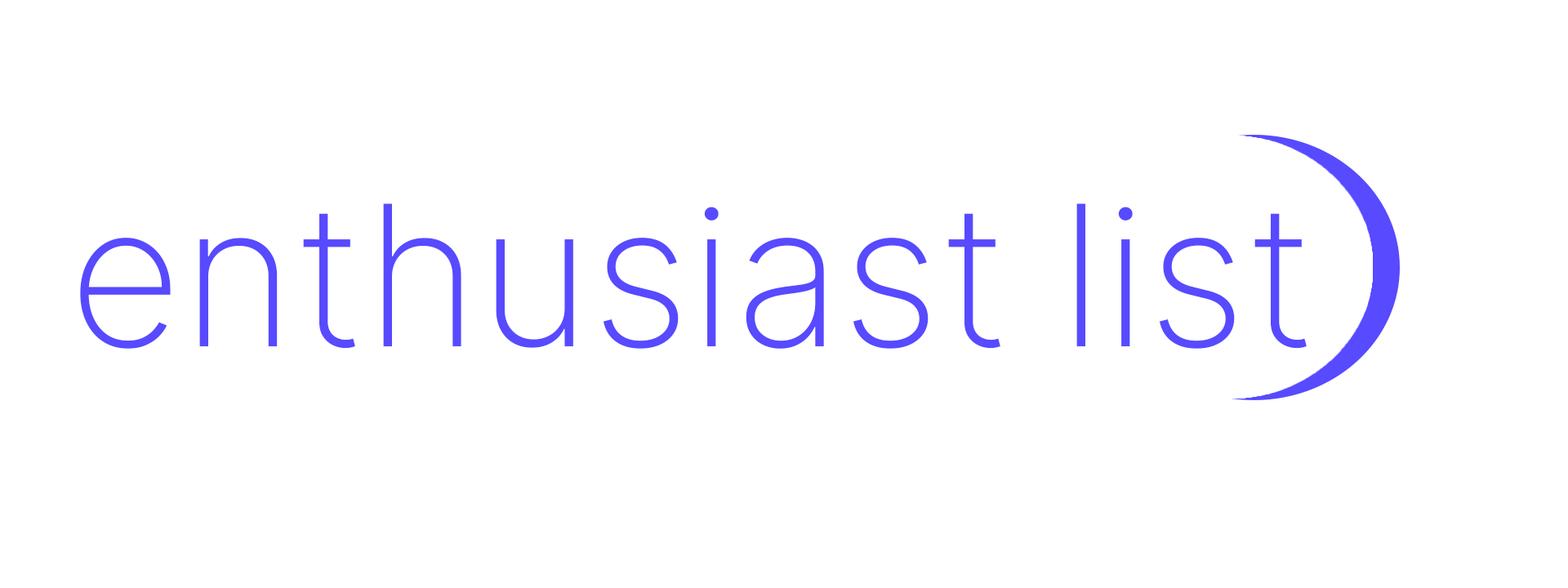
<style>
.page{position:relative;width:1568px;height:588px;background:#ffffff}
.page>*{position:absolute;margin:0}
.t1{font:196px "Inter-ExtraLight";color:#574aff}
</style>
<div class="page">
<p class="t1" style="left:80px;top:203px;width:920px;height:146px">enthusiast</p>
<p class="t1" style="left:1076px;top:203px;width:231px;height:146px">list</p>
</div>
